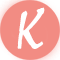
<style>
.page{position:relative;width:60px;height:60px;background:#f28c83}
.page>*{position:absolute;margin:0}
.t1{font:60px "Mistral";color:#ffffff}
</style>
<div class="page">
<p class="t1" style="left:17px;top:7px;width:28px;height:42px">K</p>
</div>
